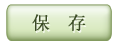
<style>
.page{position:relative;width:121px;height:45px;background:#ffffff}
.page>*{position:absolute;margin:0}
.t1{font:18px "SimSun";letter-spacing:-0.025em;color:#394a24;font-weight:bold}
</style>
<div class="page">
<p class="t1" style="left:32px;top:14px;width:54px;height:17px">保  存</p>
</div>
